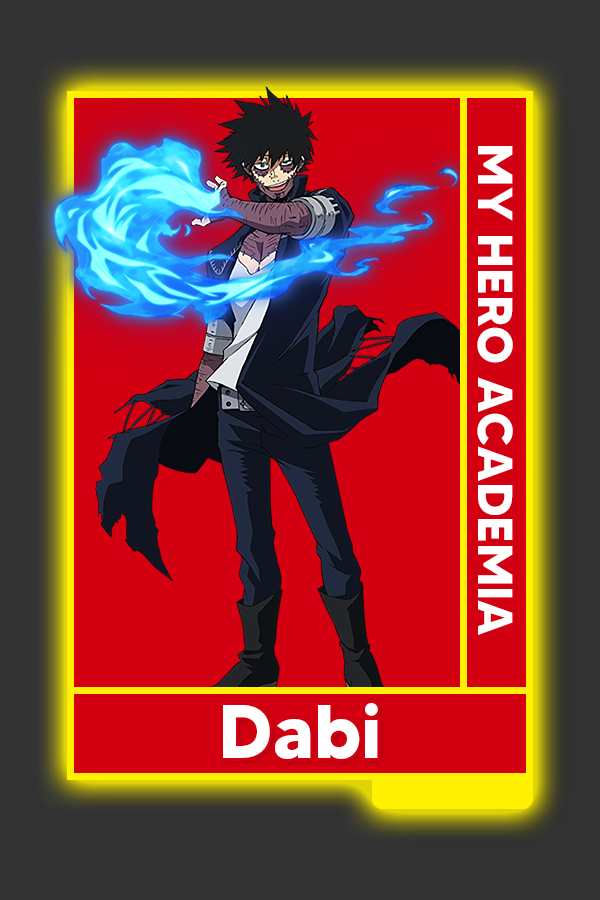
<style>
.page{position:relative;width:600px;height:900px;background:#d20010}
.page>*{position:absolute;margin:0}
.t1{font:48.8px "MADETOMMY-Bold";color:#ffffff}
.t2{font:75px "MADETOMMY-Bold";color:#ffffff}
</style>
<div class="page">
<p class="t1" style="left:477px;top:146px;width:36px;height:489px;rotate:90deg">MY HERO ACADEMIA</p>
<p class="t2" style="left:223px;top:703px;width:155px;height:56px">Dabi</p>
</div>
